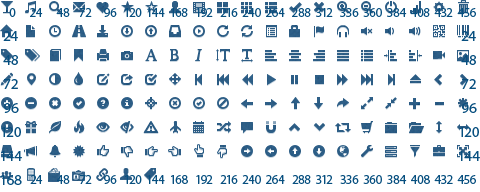
<style>
.page{position:relative;width:480px;height:192px;background:#ffffff}
.page>*{position:absolute;margin:0}
.t1{font:13px "MyriadPro-Regular";letter-spacing:-0.025em;color:#074f7f}
.t2{font:15px/24px "MyriadPro-Regular";color:#074f7f}
</style>
<div class="page">
<p class="t1" style="left:9px;top:8px;width:467px;height:9px">0      24      48    72     96   120  144  168   192   216  240  264   288  312   336  360  384  408  432  456</p>
<p class="t2" style="left:1px;top:31px;width:21px;height:154px;text-align:center">24<br>48<br>72<br>96<br>120<br>144<br>168</p>
<p class="t2" style="left:459px;top:31px;width:21px;height:130px;text-align:center">24<br>48<br>72<br>96<br>120<br>144</p>
<p class="t1" style="left:30px;top:175px;width:446px;height:9px">24      48    72     96   120  144  168   192   216  240  264   288  312   336  360  384  408  432  456</p>
</div>
